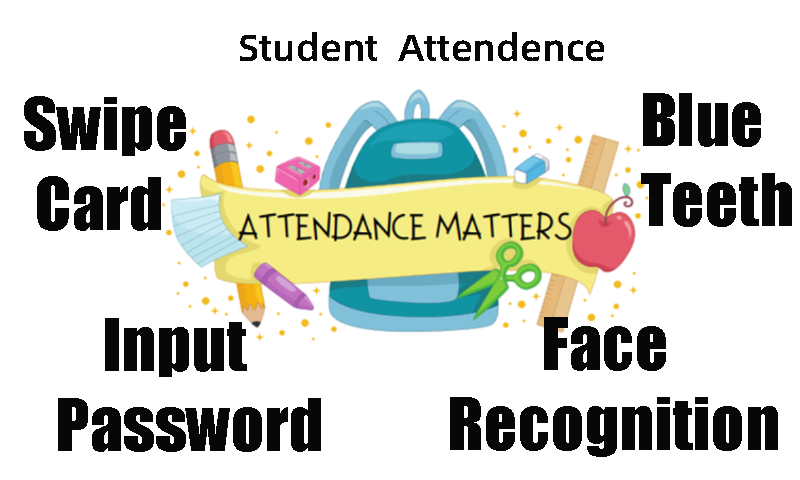
<style>
.page{position:relative;width:800px;height:480px;background:#ffffff}
.page>*{position:absolute;margin:0}
.t1{font:37.5px "AlibabaPuHuiTiM";color:#080707}
.t2{font:66.7px "Impact";color:#080707}
</style>
<div class="page">
<p class="t1" style="left:240px;top:32px;width:364px;height:29px">Student  Attendence</p>
<p class="t2" style="left:24px;top:96px;width:162px;height:135px">Swipe <br>  Card</p>
<p class="t2" style="left:641px;top:93px;width:151px;height:134px">Blue <br>  Teeth</p>
<p class="t2" style="left:58px;top:318px;width:263px;height:134px">Input <br> Password</p>
<p class="t2" style="left:450px;top:317px;width:328px;height:140px">Face <br>Recognition</p>
</div>
